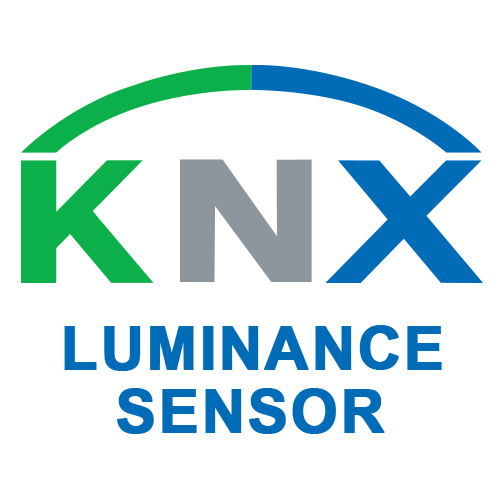
<style>
.page{position:relative;width:500px;height:500px;background:#ffffff}
.page>*{position:absolute;margin:0}
.t1{font:60px "Arial-BoldMT";letter-spacing:0.02em;color:#006bb6;text-transform:uppercase;font-weight:bold}
</style>
<div class="page">
<p class="t1" style="left:64px;top:325px;width:378px;height:46px">Luminance</p>
<p class="t1" style="left:117px;top:388px;width:268px;height:46px">SENSOR</p>
</div>
